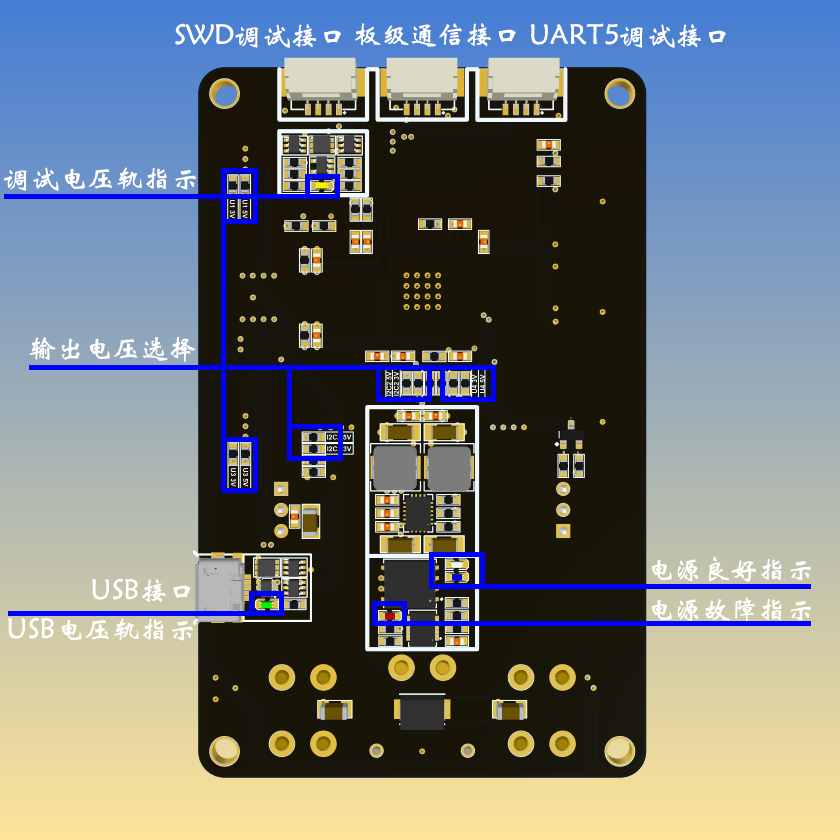
<style>
.page{position:relative;width:840px;height:840px}
.page>*{position:absolute;margin:0}
.t1{font:28px "STXinwei";color:#ffffff;text-transform:uppercase}
</style>
<div class="page">
<p class="t1" style="left:175px;top:23px;width:166px;height:25px">SWD调试接口</p>
<p class="t1" style="left:355px;top:23px;width:161px;height:24px">板级通信接口</p>
<p class="t1" style="left:530px;top:23px;width:196px;height:25px">UART5调试接口</p>
<p class="t1" style="left:4px;top:167px;width:192px;height:24px">调试电压轨指示</p>
<p class="t1" style="left:29px;top:337px;width:167px;height:25px">输出电压选择</p>
<p class="t1" style="left:652px;top:556px;width:159px;height:26px">电源良好指示</p>
<p class="t1" style="left:92px;top:578px;width:99px;height:25px">USB接口</p>
<p class="t1" style="left:652px;top:597px;width:159px;height:26px">电源故障指示</p>
<p class="t1" style="left:8px;top:617px;width:185px;height:24px">USB电压轨指示</p>
</div>
